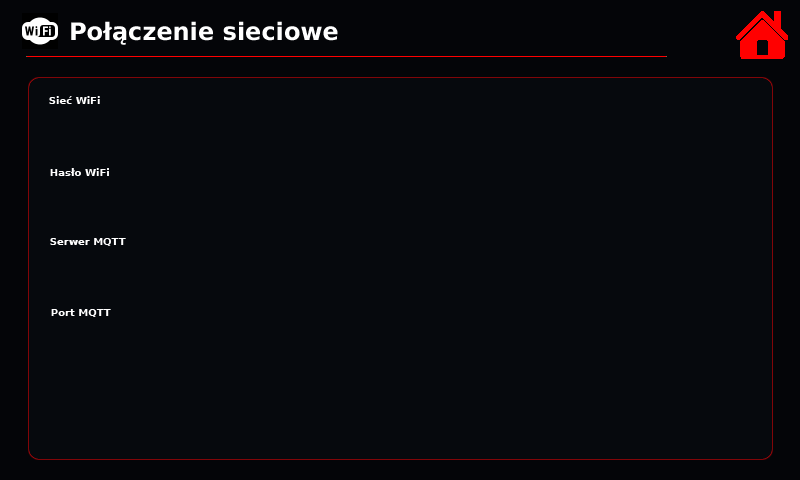
<style>
.page{position:relative;width:800px;height:480px;background:#06090d}
.page>*{position:absolute;margin:0}
.t1{font:24px "DejaVuSans-Bold";color:#ffffff}
.t2{font:10px "DejaVuSans-Bold";color:#ffffff}
</style>
<div class="page">
<p class="t1" style="left:71px;top:21px;width:267px;height:24px">Połączenie sieciowe</p>
<p class="t2" style="left:49px;top:96px;width:51px;height:8px">Sieć WiFi</p>
<p class="t2" style="left:50px;top:168px;width:59px;height:8px">Hasło WiFi</p>
<p class="t2" style="left:50px;top:238px;width:76px;height:8px">Serwer MQTT</p>
<p class="t2" style="left:51px;top:309px;width:60px;height:8px">Port MQTT</p>
</div>
